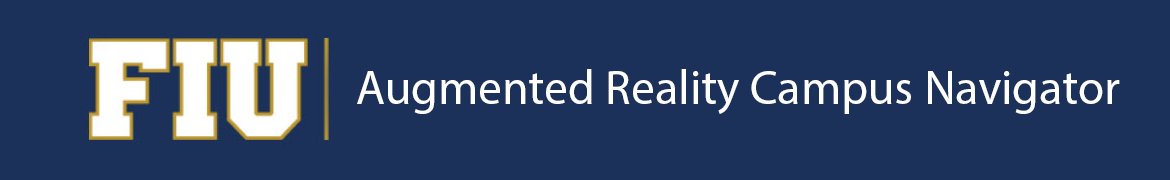
<style>
.page{position:relative;width:1170px;height:180px;background:#1b315a}
.page>*{position:absolute;margin:0}
.t1{font:48px "MyriadPro-Regular";color:#ffffff}
</style>
<div class="page">
<p class="t1" style="left:357px;top:69px;width:763px;height:45px">Augmented Reality Campus Navigator</p>
</div>
